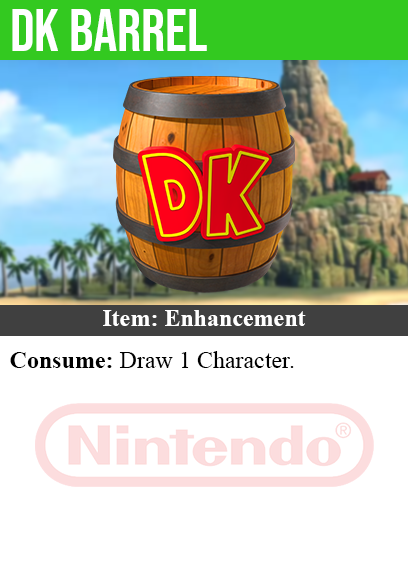
<style>
.page{position:relative;width:408px;height:585px;background:#ffffff}
.page>*{position:absolute;margin:0}
.t1{font:60px "BebasNeue-Regular";color:#ffffff}
.t2{font:24px "TimesNewRomanPS-BoldMT";color:#ffffff}
.t3{font:24px "TimesNewRomanPSMT";color:#000000}
.t4{font:24px "TimesNewRomanPS-BoldMT";color:#000000}
</style>
<div class="page">
<p class="t1" style="left:12px;top:9px;width:195px;height:42px">dk barrel</p>
<p class="t2" style="left:103px;top:310px;width:203px;height:16px">Item: Enhancement</p>
<p class="t3" style="left:10px;top:351px;width:284px;height:17px"><span class="t4">Consume:</span> Draw 1 Character.</p>
</div>
